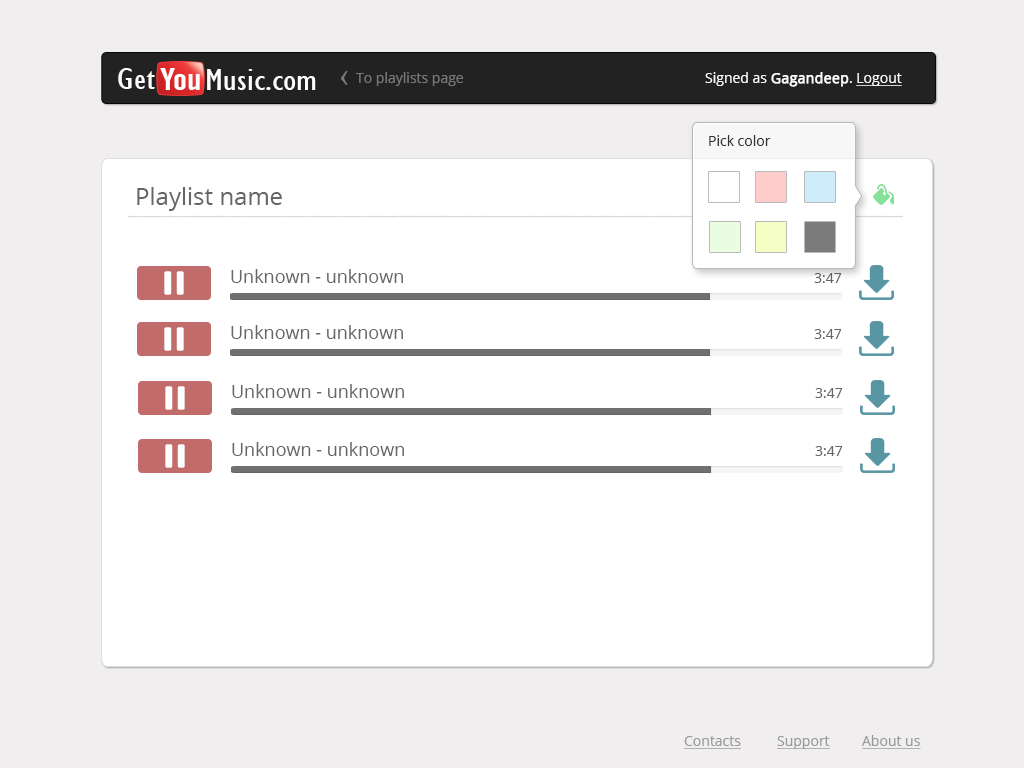
<style>
.page{position:relative;width:1024px;height:768px;background:#ffffff}
.page>*{position:absolute;margin:0}
.t1{font:31px "GillSansMT-Condensed";color:#fafdfa;scale:1.27 1}
.t2{font:31px "AlternateGothicNo2BT-Regular";color:#fffefe;scale:1.27 1}
.t3{font:14px "OpenSans";color:#777777}
.t4{font:14px "OpenSans";color:#fbf9f9}
.t5{font:14px "OpenSans";color:#fbf9f9;font-weight:bold}
.t6{font:14px "OpenSans";color:#fbf9f9;text-decoration:underline}
.t7{font:14px "OpenSans";color:#333333}
.t8{font:24px "OpenSans";color:#666666}
.t9{font:18px "OpenSans";color:#666666}
.t10{font:14px "OpenSans";color:#666666}
.t11{font:14px "OpenSans";color:#999999;text-decoration:underline}
</style>
<div class="page">
<p class="t1" style="left:118px;top:68px;width:37px;height:21px">Get</p>
<p class="t2" style="left:160px;top:68px;width:40px;height:22px">You</p>
<p class="t1" style="left:207px;top:69px;width:58px;height:21px">Music</p>
<p class="t1" style="left:266px;top:76px;width:50px;height:14px">.com</p>
<p class="t3" style="left:356px;top:72px;width:107px;height:14px">To playlists page</p>
<p class="t4" style="left:705px;top:72px;width:197px;height:15px">Signed as <span class="t5">Gagandeep</span>. <span class="t6">Logout</span></p>
<p class="t7" style="left:709px;top:135px;width:62px;height:11px">Pick color</p>
<p class="t8" style="left:137px;top:187px;width:145px;height:24px">Playlist name</p>
<p class="t9" style="left:231px;top:269px;width:172px;height:14px">Unknown - unknown</p>
<p class="t10" style="left:814px;top:273px;width:28px;height:10px">3:47</p>
<p class="t9" style="left:231px;top:325px;width:172px;height:14px">Unknown - unknown</p>
<p class="t10" style="left:814px;top:329px;width:28px;height:10px">3:47</p>
<p class="t9" style="left:232px;top:384px;width:172px;height:14px">Unknown - unknown</p>
<p class="t10" style="left:815px;top:388px;width:28px;height:10px">3:47</p>
<p class="t9" style="left:232px;top:442px;width:172px;height:14px">Unknown - unknown</p>
<p class="t10" style="left:815px;top:446px;width:28px;height:10px">3:47</p>
<p class="t11" style="left:684px;top:736px;width:57px;height:13px">Contacts</p>
<p class="t11" style="left:777px;top:736px;width:53px;height:13px">Support</p>
<p class="t11" style="left:862px;top:735px;width:59px;height:14px">About us</p>
</div>
